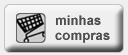
<style>
.page{position:relative;width:128px;height:55px;background:#efefef}
.page>*{position:absolute;margin:0}
.t1{font:13.3px "Arial-BoldMT";color:#4e4e4e}
</style>
<div class="page">
<p class="t1" style="left:55px;top:15px;width:55px;height:28px">minhas<br>compras</p>
</div>
